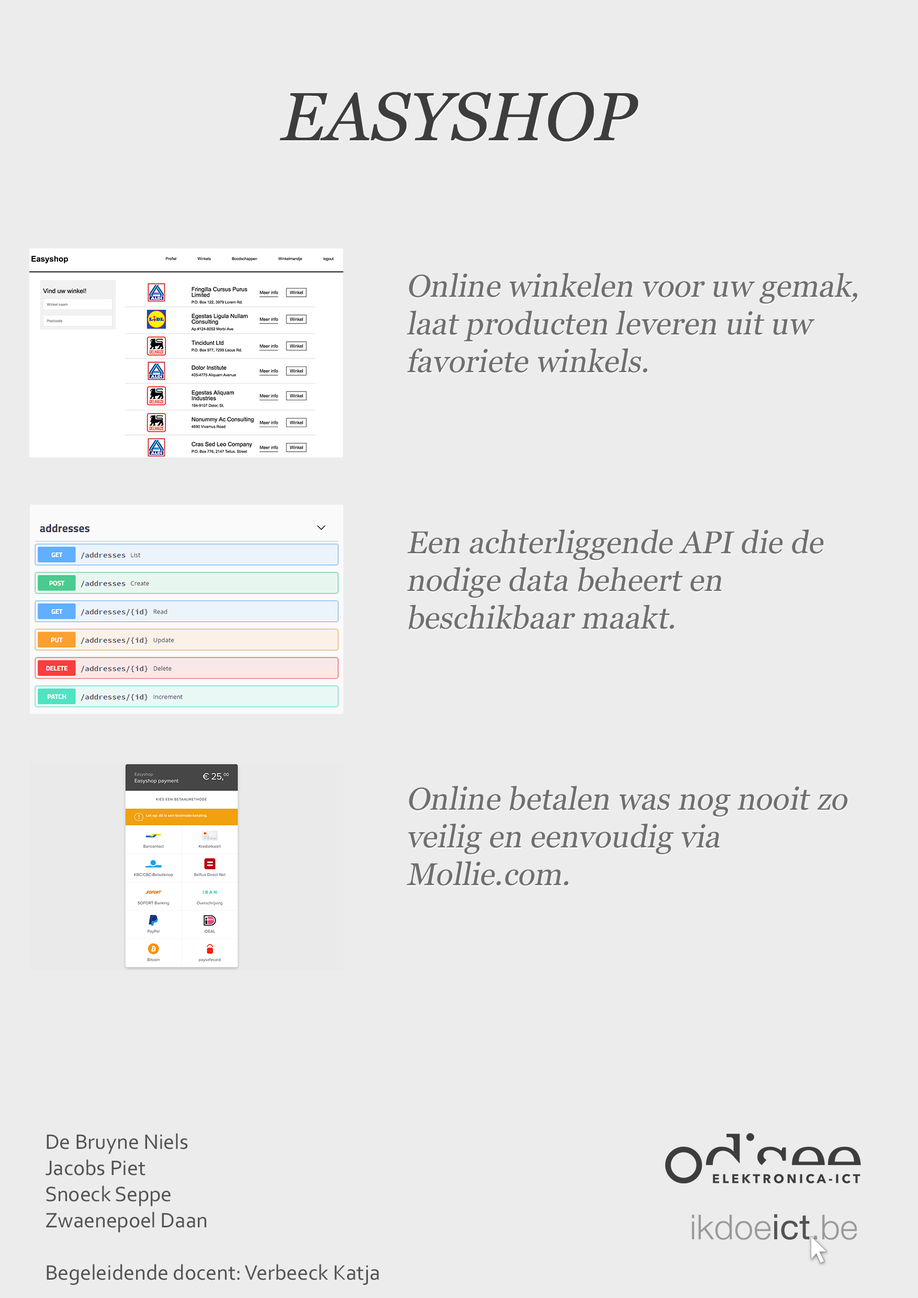
<style>
.page{position:relative;width:918px;height:1298px;background:#ececec}
.page>*{position:absolute;margin:0}
.t1{font:68.1px "Georgia-Italic";color:#3e3d3d;text-transform:uppercase}
.t2{font:31.4px "Georgia";color:#6f6f6f;font-style:italic}
.t3{font:21.8px "Corbel";color:#545353}
</style>
<div class="page">
<p class="t1" style="left:280px;top:92px;width:359px;height:50px">EASYSHOP</p>
<p class="t2" style="left:407px;top:273px;width:451px;height:100px">Online winkelen voor uw gemak, laat producten leveren uit uw <br>favoriete winkels.</p>
<p class="t2" style="left:407px;top:529px;width:417px;height:101px">Een achterliggende API die de nodige data beheert en <br>beschikbaar maakt.</p>
<p class="t2" style="left:407px;top:786px;width:441px;height:100px">Online betalen was nog nooit zo veilig en eenvoudig via Mollie.com.</p>
<p class="t3" style="left:46px;top:1134px;width:333px;height:151px">De Bruyne Niels<br>Jacobs Piet<br>Snoeck Seppe<br>Zwaenepoel Daan<br><br>Begeleidende docent: Verbeeck Katja</p>
</div>
